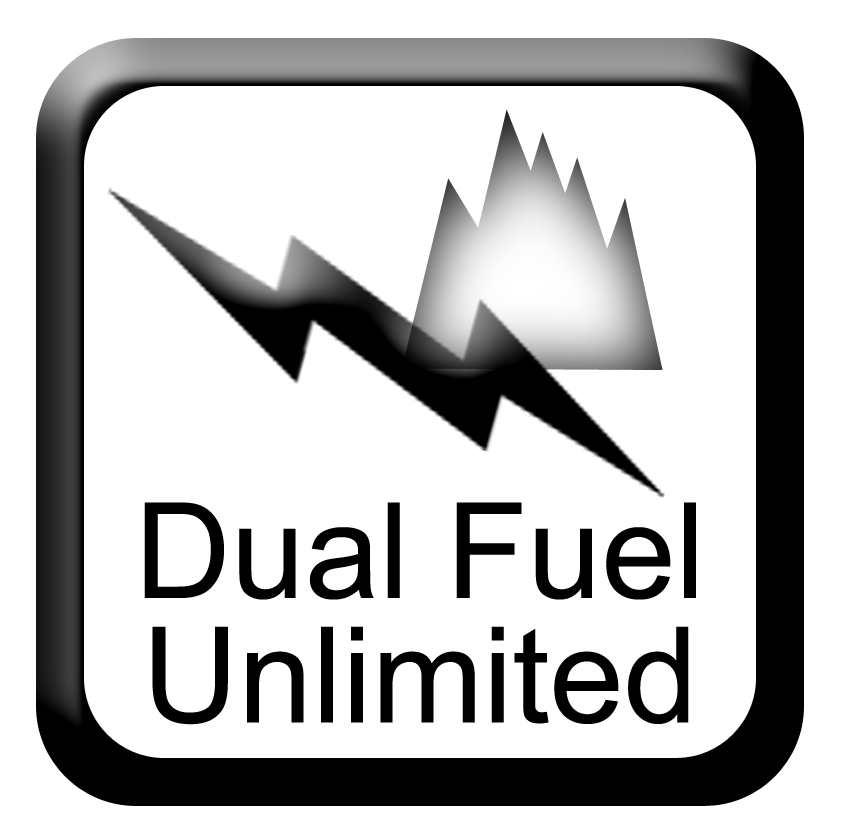
<style>
.page{position:relative;width:844px;height:836px;background:#ffffff}
.page>*{position:absolute;margin:0}
.t1{font:133.3px/124.4px "ArialMT";color:#000000}
</style>
<div class="page">
<p class="t1" style="left:144px;top:502px;width:552px;height:223px;text-align:center">Dual Fuel<br>Unlimited</p>
</div>
